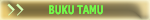
<style>
.page{position:relative;width:150px;height:20px}
.page>*{position:absolute;margin:0}
.t1{font:48px "Parchment-Regular";color:#d5feb5}
.t2{font:12px "Verdana-Bold";color:#74fb4a;scale:0.68 1}
</style>
<div class="page">
<p class="t1" style="left:7px;top:3px;width:17px;height:13px">&gt;&gt;</p>
<p class="t2" style="left:49px;top:5px;width:54px;height:10px">BUKU TAMU</p>
</div>
